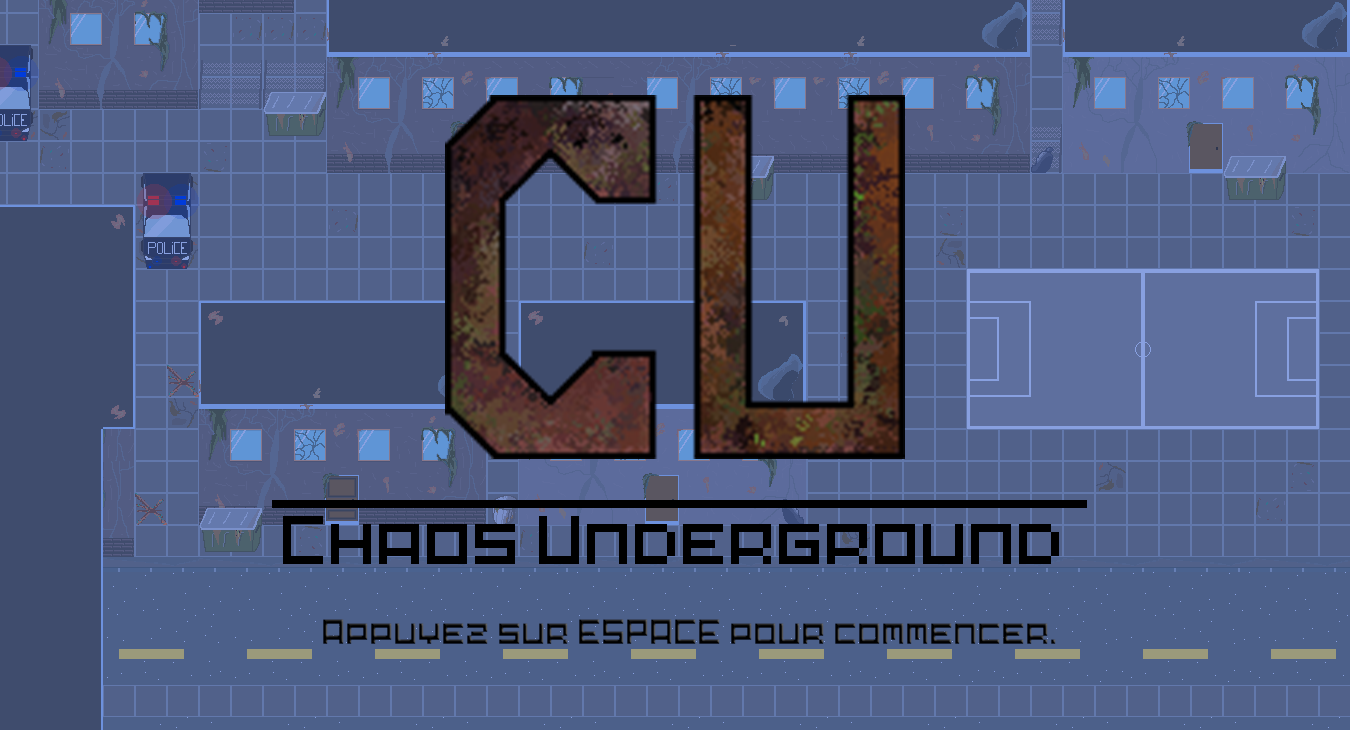
<style>
.page{position:relative;width:1350px;height:730px;background:#51618a}
.page>*{position:absolute;margin:0}
.t1{font:64px "Pixel-Art";color:#000000}
.t2{font:32px "Pixel-Art";color:#000000}
</style>
<div class="page">
<p class="t1" style="left:283px;top:516px;width:776px;height:48px">Chaos Underground</p>
<p class="t2" style="left:323px;top:619px;width:733px;height:25px">Appuyez sur ESPACE pour commencer.</p>
</div>
